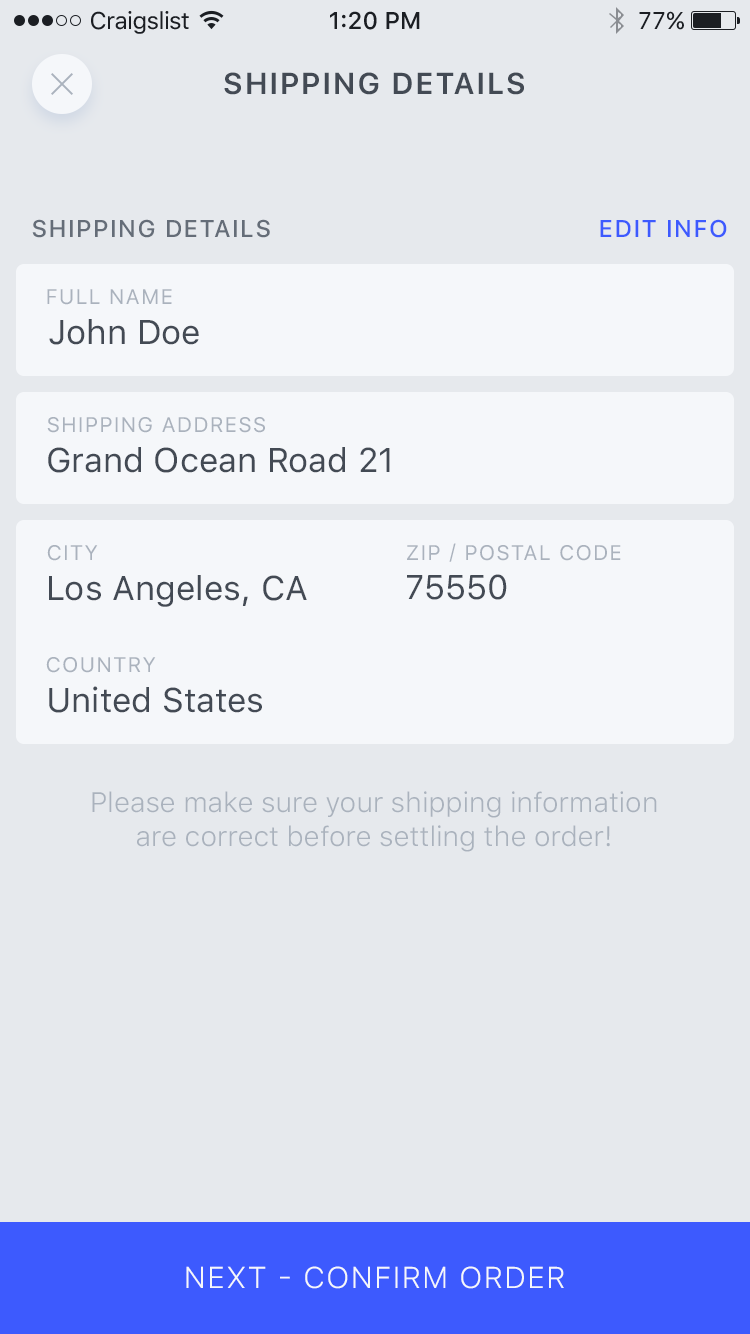
<style>
.page{position:relative;width:750px;height:1334px;background:#e6e9ed}
.page>*{position:absolute;margin:0}
.t1{font:24px "SFUIText-Regular";letter-spacing:-0.025em;color:#1b1e23}
.t2{font:24px "SFUIText-Medium";color:#1b1e23}
.t3{font:24px "SFUIText-Regular";color:#1b1e23}
.t4{font:30px "SFUIDisplay-Semibold";letter-spacing:0.1em;color:#434a54;text-transform:uppercase}
.t5{font:24px "SFUIDisplay-Medium";letter-spacing:0.1em;color:#656d78;text-transform:uppercase}
.t6{font:24px "SFUIDisplay-Medium";letter-spacing:0.1em;color:#3d5afe;text-transform:uppercase}
.t7{font:21px "SFUIDisplay-Regular";letter-spacing:0.1em;color:#aab2bd;text-transform:uppercase}
.t8{font:34px "SFUIText-Regular";color:#434a54}
.t9{font:28px "SFUIText-Light";color:#aab2bd}
.t10{font:30px "SFUIDisplay-Light";letter-spacing:0.1em;color:#f5f7fa;text-transform:uppercase}
</style>
<div class="page">
<p class="t1" style="left:91px;top:11px;width:98px;height:23px">Craigslist</p>
<p class="t2" style="left:330px;top:11px;width:90px;height:19px">1:20 PM</p>
<p class="t3" style="left:639px;top:11px;width:45px;height:19px">77%</p>
<p class="t4" style="left:224px;top:72px;width:300px;height:23px">Shipping details</p>
<p class="t5" style="left:32px;top:219px;width:238px;height:19px">Shipping details</p>
<p class="t6" style="left:600px;top:219px;width:127px;height:19px">Edit info</p>
<p class="t7" style="left:47px;top:289px;width:125px;height:16px">Full name</p>
<p class="t8" style="left:49px;top:319px;width:150px;height:26px">John Doe</p>
<p class="t7" style="left:47px;top:417px;width:218px;height:16px">shipping Address</p>
<p class="t8" style="left:48px;top:447px;width:342px;height:26px">Grand Ocean Road 21</p>
<p class="t7" style="left:47px;top:545px;width:51px;height:16px">City</p>
<p class="t7" style="left:407px;top:543px;width:214px;height:19px">Zip / Postal Code</p>
<p class="t8" style="left:49px;top:575px;width:258px;height:32px">Los Angeles, CA</p>
<p class="t8" style="left:407px;top:574px;width:100px;height:26px">75550</p>
<p class="t7" style="left:46px;top:657px;width:110px;height:16px">Country</p>
<p class="t8" style="left:49px;top:686px;width:213px;height:27px">United States</p>
<p class="t9" style="left:92px;top:791px;width:565px;height:61px;text-align:center">Please make sure your shipping information<br>are correct before settling the order!</p>
<p class="t10" style="left:186px;top:1266px;width:378px;height:23px">Next - Confirm order</p>
</div>
